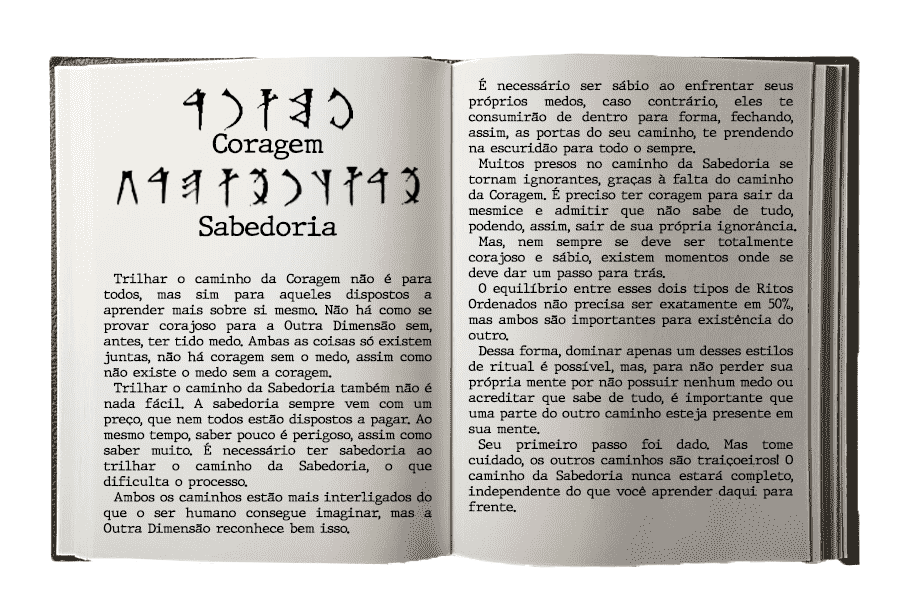
<style>
.page{position:relative;width:900px;height:601px;background:#ffffff}
.page>*{position:absolute;margin:0}
.t1{font:13px "JMHTypewriter-Regular";color:#000000}
.t2{font:27px "JMHTypewriter-Regular";color:#000000}
</style>
<div class="page">
<p class="t1" style="left:468px;top:77px;width:329px;height:436px;text-align:justify">É necessário ser sábio ao enfrentar seus próprios medos, caso contrário, eles te consumirão de dentro para forma, fechando, assim, as portas do seu caminho, te prendendo na escuridão para todo o sempre. <br>Muitos presos no caminho da Sabedoria se tornam ignorantes, graças à falta do caminho da Coragem. É preciso ter coragem para sair da mesmice e admitir que não sabe de tudo, podendo, assim, sair de sua própria ignorância. <br>Mas, nem sempre se deve ser totalmente corajoso e sábio, existem momentos onde se deve dar um passo para trás.<br>O equilíbrio entre esses dois tipos de Ritos Ordenados não precisa ser exatamente em 50%, mas ambos são importantes para existência do outro. <br>Dessa forma, dominar apenas um desses estilos de ritual é possível, mas, para não perder sua própria mente por não possuir nenhum medo ou acreditar que sabe de tudo, é importante que uma parte do outro caminho esteja presente em sua mente.<br>Seu primeiro passo foi dado. Mas tome cuidado, os outros caminhos são traiçoeiros! O caminho da Sabedoria nunca estará completo, independente do que você aprender daqui para frente.</p>
<p class="t2" style="left:212px;top:133px;width:112px;height:27px">Coragem</p>
<p class="t2" style="left:199px;top:215px;width:138px;height:22px">Sabedoria</p>
<p class="t1" style="left:103px;top:273px;width:329px;height:261px;text-align:justify">Trilhar o caminho da Coragem não é para todos, mas sim para aqueles dispostos a aprender mais sobre si mesmo. Não há como se provar corajoso para a Outra Dimensão sem, antes, ter tido medo. Ambas as coisas só existem juntas, não há coragem sem o medo, assim como não existe o medo sem a coragem.<br>Trilhar o caminho da Sabedoria também não é nada fácil. A sabedoria sempre vem com um preço, que nem todos estão dispostos a pagar. Ao mesmo tempo, saber pouco é perigoso, assim como saber muito. É necessário ter sabedoria ao trilhar o caminho da Sabedoria, o que dificulta o processo.<br>Ambos os caminhos estão mais interligados do que o ser humano consegue imaginar, mas a Outra Dimensão reconhece bem isso.</p>
</div>
